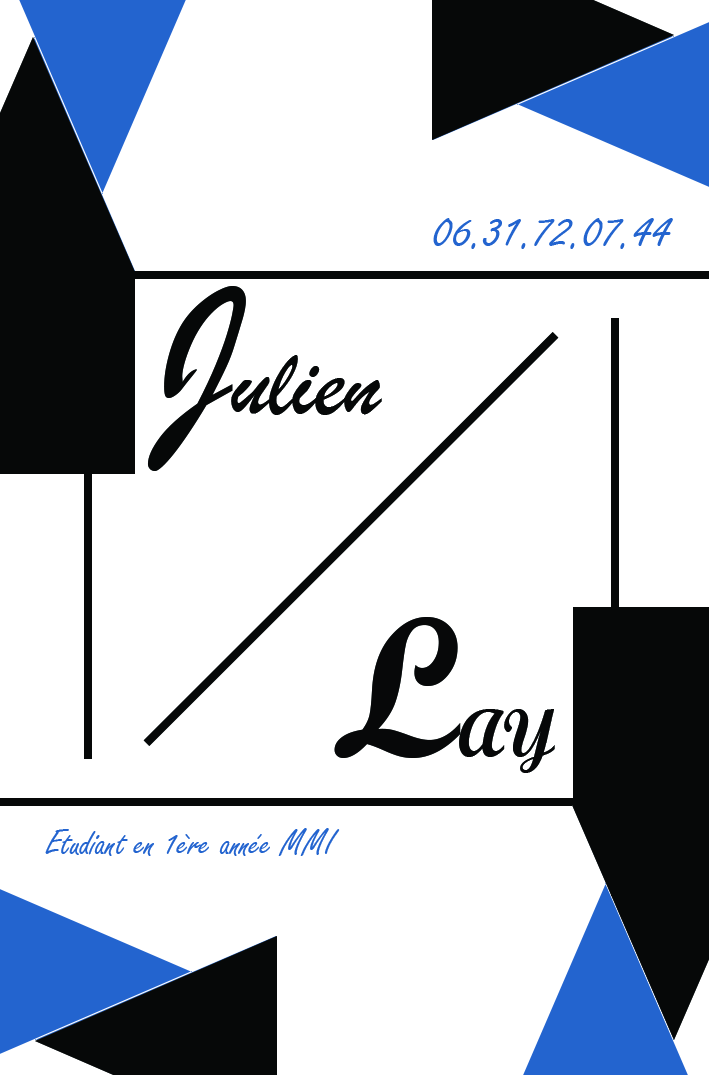
<style>
.page{position:relative;width:709px;height:1075px;background:#ffffff}
.page>*{position:absolute;margin:0}
.t1{font:56px "FreestyleScript-Regular";color:#2364ce}
.t2{font:100px "BrushScriptMT";color:#060808}
.t3{font:200px "BrushScriptMT";color:#060808}
.t4{font:66.7px "ScriptMTBold";color:#070809}
.t5{font:49px "BrushScriptMT";color:#060808}
.t6{font:200px "ScriptMTBold";color:#070809}
.t7{font:38.5px "FreestyleScript-Regular";color:#2364ce}
</style>
<div class="page">
<p class="t1" style="left:433px;top:218px;width:240px;height:31px">06.31.72.07.44</p>
<p class="t2" style="left:147px;top:286px;width:235px;height:185px"><span class="t3">J</span>ulien</p>
<p class="t4" style="left:334px;top:617px;width:221px;height:156px"><span class="t5"> </span><span class="t6">L</span>AY</p>
<p class="t7" style="left:45px;top:828px;width:295px;height:28px">Etudiant en 1ère année MMI</p>
</div>
